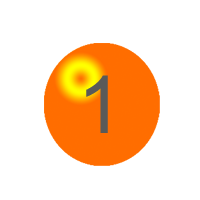
<style>
.page{position:relative;width:200px;height:200px;background:#ffffff}
.page>*{position:absolute;margin:0}
.t1{font:80px "ArialMT";color:#595a59}
</style>
<div class="page">
<p class="t1" style="left:86px;top:75px;width:22px;height:58px">1</p>
</div>
